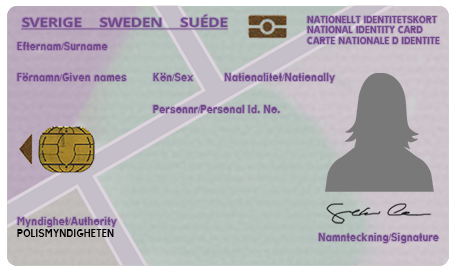
<style>
.page{position:relative;width:457px;height:272px}
.page>*{position:absolute;margin:0}
.t1{font:12.9px "OpenSans-Bold";letter-spacing:-0.035em;color:#73478e;text-decoration:underline;scale:1.22 1}
.t2{font:8.7px "TratexSvart";letter-spacing:-0.035em;color:#73478e}
.t3{font:9.5px "TratexSvart";letter-spacing:-0.035em;color:#73478e}
.t4{font:9.5px "TimesNewRomanPSMT";letter-spacing:-0.035em;color:#73478e}
.t5{font:9.5px "TratexSvart";letter-spacing:-0.035em;color:#000000}
</style>
<div class="page">
<p class="t1" style="left:21px;top:14px;width:207px;height:16px">SVERIGE     SWEDEN     SUÉDE</p>
<p class="t2" style="left:307px;top:16px;width:133px;height:28px">NATIONELLT IDENTITETSKORT<br>NATIONAL IDENTITY CARD<br>CARTE NATIONALE D IDENTITE</p>
<p class="t3" style="left:17px;top:42px;width:91px;height:8px">Efternam<span class="t4">/</span>Surname</p>
<p class="t3" style="left:17px;top:73px;width:110px;height:8px">Förnamn<span class="t4">/</span>Given names</p>
<p class="t3" style="left:153px;top:73px;width:40px;height:8px">Kön<span class="t4">/</span>Sex</p>
<p class="t3" style="left:224px;top:73px;width:111px;height:10px">Nationalitet<span class="t4">/</span>Nationally</p>
<p class="t3" style="left:153px;top:105px;width:127px;height:8px">Personnr<span class="t4">/</span>Personal Id. No.</p>
<p class="t3" style="left:17px;top:217px;width:100px;height:10px">Myndighet<span class="t4">/</span>Authority</p>
<p class="t5" style="left:17px;top:229px;width:97px;height:8px">POLISMYNDIGHETEN</p>
<p class="t3" style="left:318px;top:233px;width:121px;height:10px">Namnteckning<span class="t4">/</span>Signature</p>
</div>
